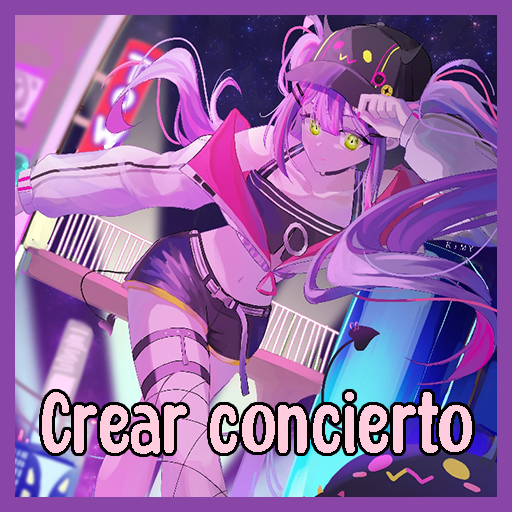
<style>
.page{position:relative;width:512px;height:512px}
.page>*{position:absolute;margin:0}
.t1{font:94.7px "HoneyNotes-Regular";color:#ffcddd}
</style>
<div class="page">
<p class="t1" style="left:42px;top:392px;width:430px;height:62px">Crear concierto</p>
</div>
